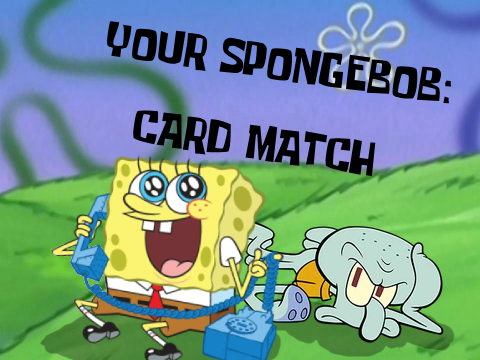
<style>
.page{position:relative;width:480px;height:360px}
.page>*{position:absolute;margin:0}
.t1{font:34.4px "SpongeboyTT1";color:#000000}
</style>
<div class="page">
<p class="t1" style="left:107px;top:21px;width:345px;height:155px;rotate:8deg">YOUR SPONGEBOB:<br><br>   CARD MATCH</p>
</div>
